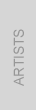
<style>
.page{position:relative;width:36px;height:110px;background:#d6d6d6}
.page>*{position:absolute;margin:0}
.t1{font:14px "ArialMT";letter-spacing:-0.02em;color:#979797}
</style>
<div class="page">
<p class="t1" style="left:13px;top:29px;width:11px;height:57px;rotate:-90deg">ARTISTS</p>
</div>
